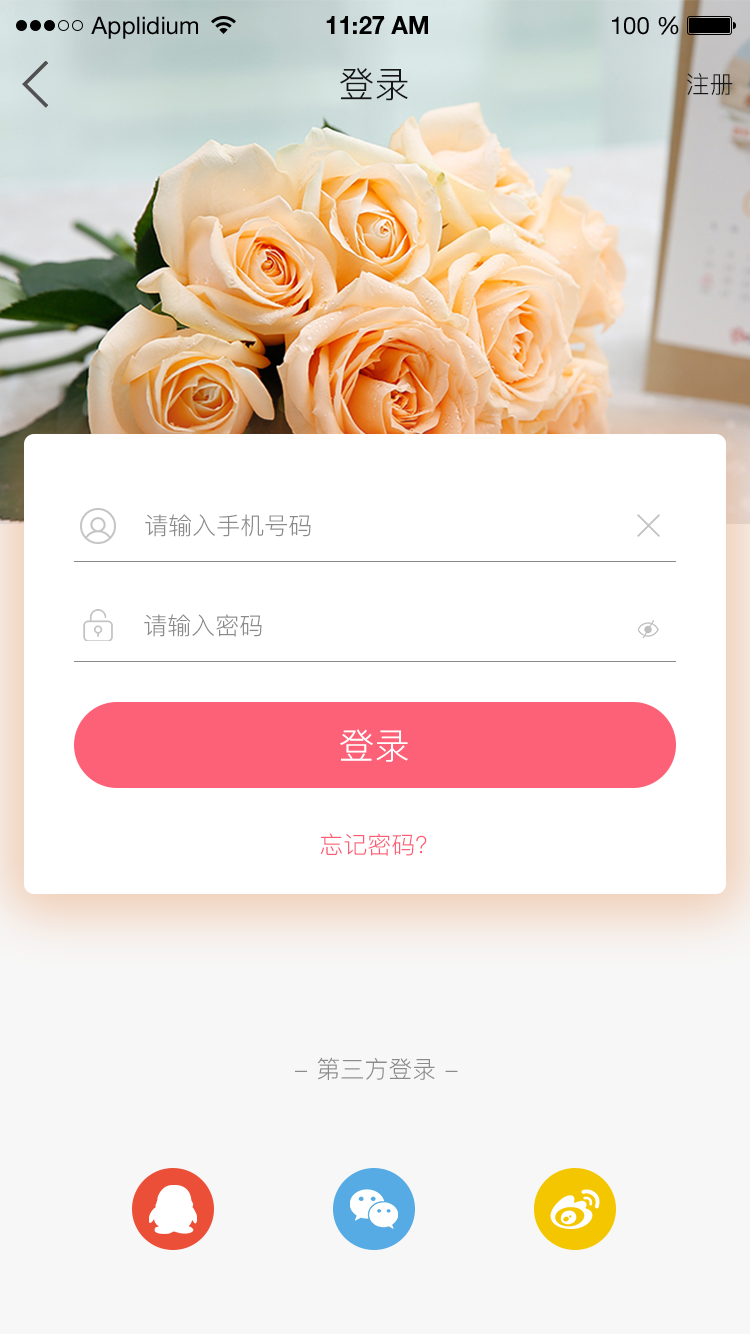
<style>
.page{position:relative;width:750px;height:1334px;background:#ffffff}
.page>*{position:absolute;margin:0}
.t1{font:24px "HelveticaNeueLTStd-Roman";color:#000000}
.t2{font:24px "HelveticaNeueLTStd-Bd";color:#000000}
.t3{font:36px "PingFang-SC-Regular";color:#151515}
.t4{font:24px "PingFang-SC-Regular";color:#151515}
.t5{font:24px "PingFang-SC-Regular";color:#8a8a8a}
.t6{font:36px "PingFang-SC-Regular";color:#ffffff}
.t7{font:24px "PingFang-SC-Regular";color:#fd5d74}
</style>
<div class="page">
<p class="t1" style="left:91px;top:16px;width:107px;height:23px">Applidium</p>
<p class="t2" style="left:326px;top:16px;width:102px;height:18px">11:27 AM</p>
<p class="t1" style="left:612px;top:16px;width:67px;height:19px">100 %</p>
<p class="t3" style="left:340px;top:67px;width:68px;height:34px">登录</p>
<p class="t4" style="left:687px;top:73px;width:46px;height:22px">注册</p>
<p class="t5" style="left:145px;top:514px;width:166px;height:23px">请输入手机号码</p>
<p class="t5" style="left:144px;top:614px;width:118px;height:23px">请输入密码</p>
<p class="t6" style="left:340px;top:729px;width:68px;height:33px">登录</p>
<p class="t7" style="left:320px;top:833px;width:107px;height:23px">忘记密码？</p>
<p class="t5" style="left:295px;top:1057px;width:163px;height:23px">- 第三方登录 -</p>
</div>
